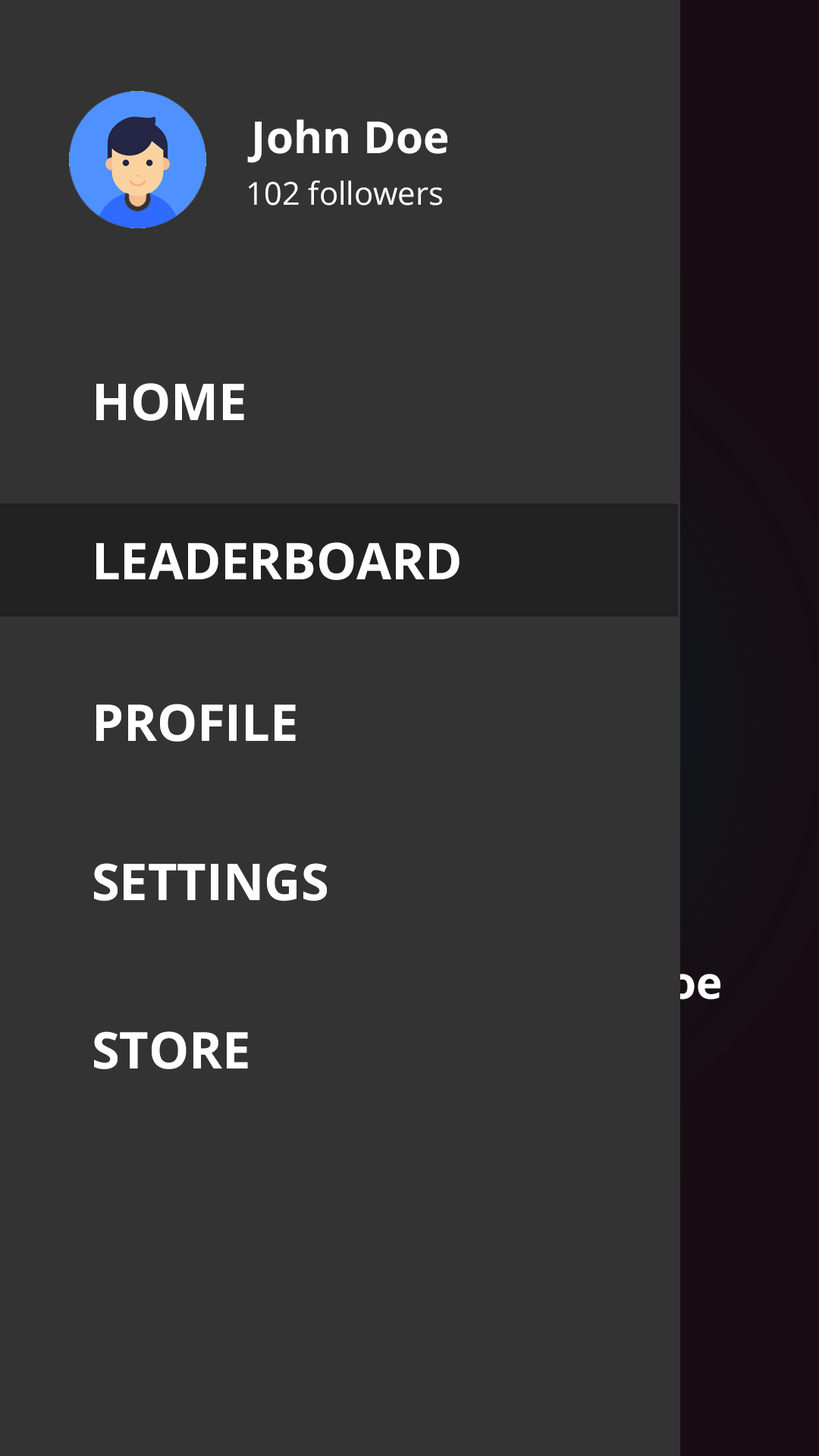
<style>
.page{position:relative;width:819px;height:1456px;background:#333333}
.page>*{position:absolute;margin:0}
.t1{font:44.2px "OpenSans-Bold";color:#ffffff}
.t2{font:31.6px "OpenSans";color:#ffffff}
.t3{font:50.6px "OpenSans-Bold";color:#ffffff}
</style>
<div class="page">
<p class="t1" style="left:247px;top:119px;width:200px;height:44px">John Doe</p>
<p class="t2" style="left:248px;top:180px;width:194px;height:26px">102 followers</p>
<p class="t3" style="left:96px;top:383px;width:148px;height:38px">HOME</p>
<p class="t3" style="left:96px;top:542px;width:364px;height:38px">LEADERBOARD</p>
<p class="t3" style="left:96px;top:704px;width:200px;height:38px">PROFILE</p>
<p class="t3" style="left:94px;top:863px;width:233px;height:38px">SETTINGS</p>
<p class="t3" style="left:94px;top:1031px;width:154px;height:38px">STORE</p>
</div>
